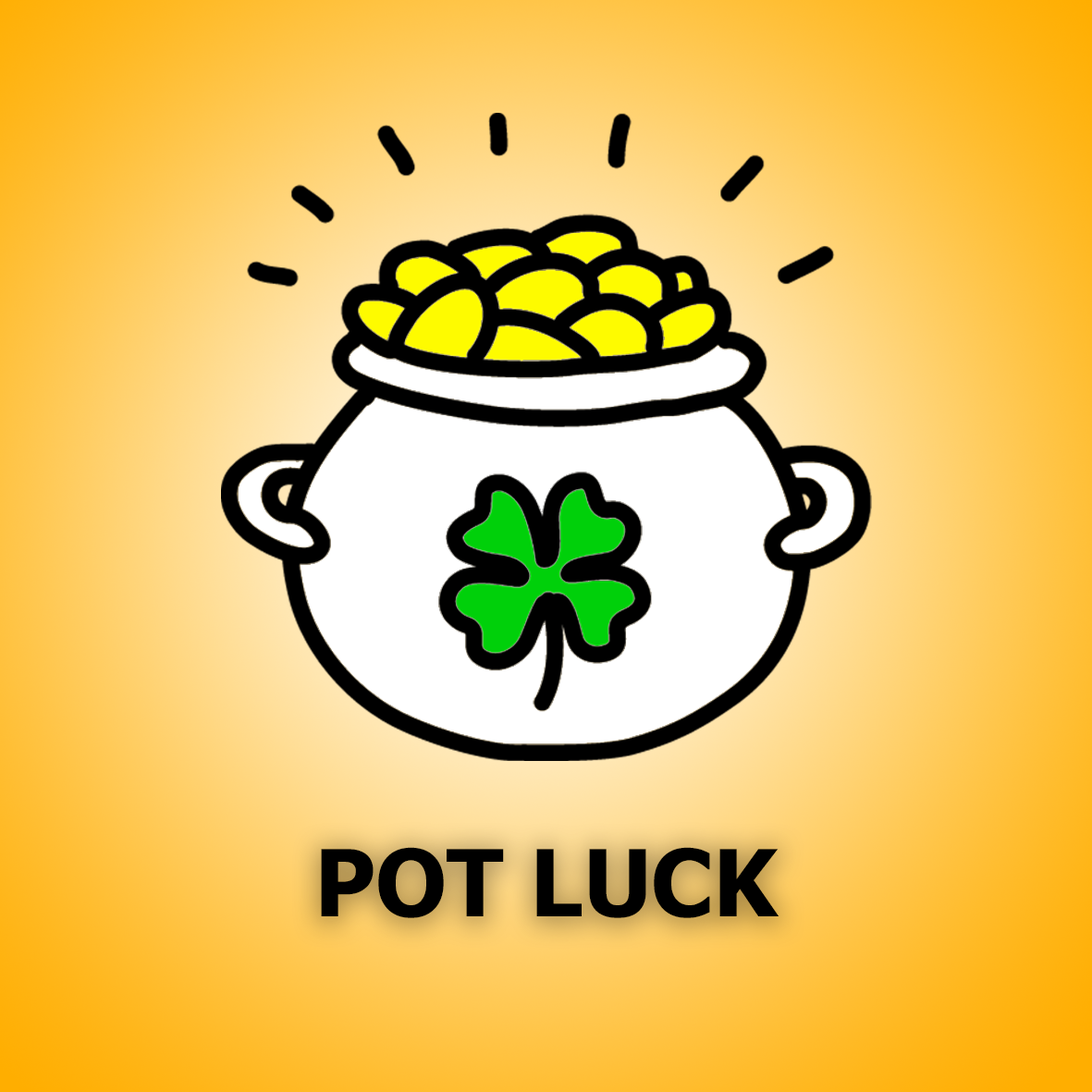
<style>
.page{position:relative;width:1092px;height:1092px}
.page>*{position:absolute;margin:0}
.t1{font:92.5px "Tahoma-Bold";color:#000000}
</style>
<div class="page">
<p class="t1" style="left:321px;top:847px;width:458px;height:71px">POT LUCK</p>
</div>
